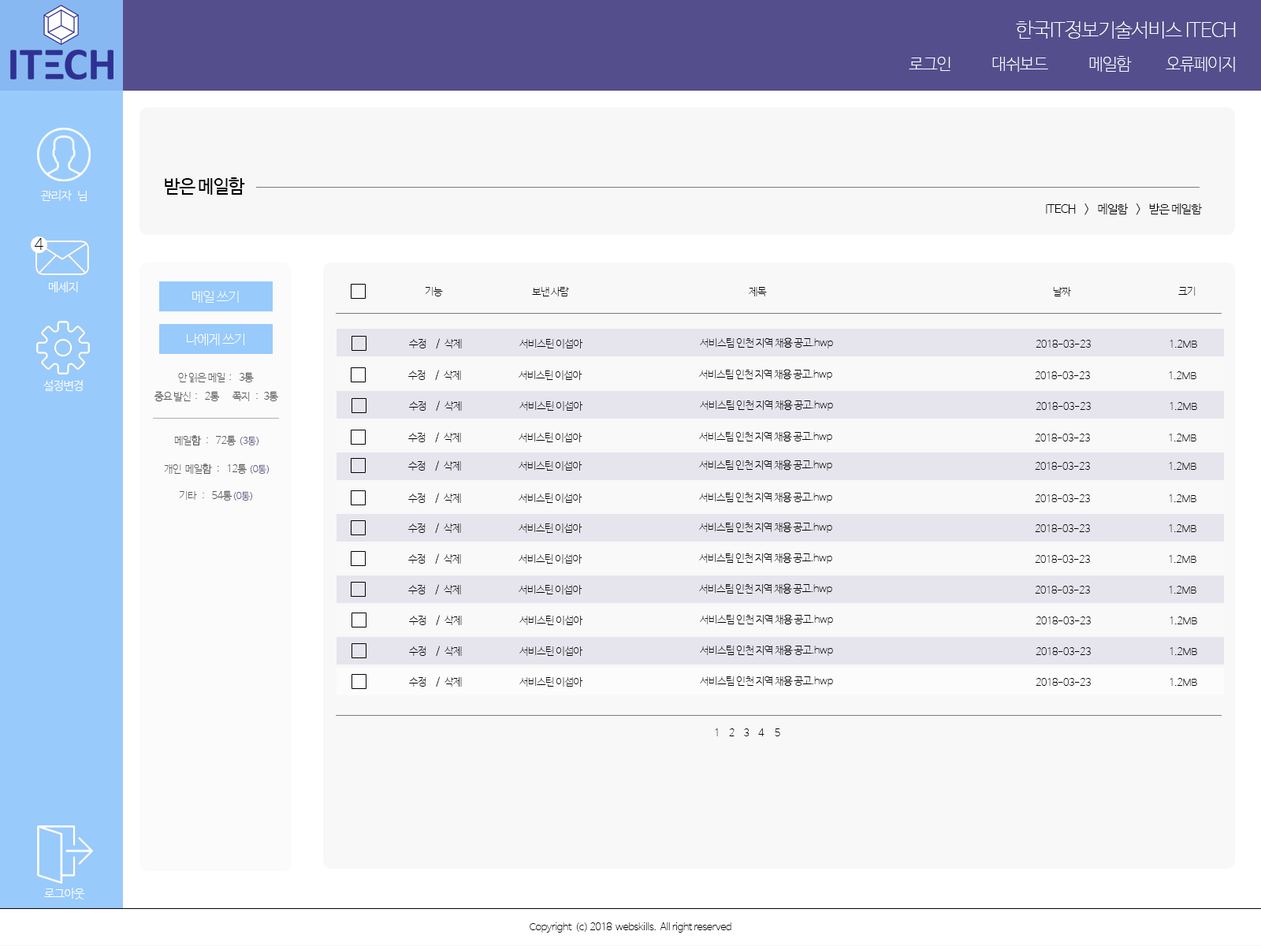
<style>
.page{position:relative;width:1261px;height:946px}
.page>*{position:absolute;margin:0}
.t1{font:19.7px "NanumBarunGothicUltraLight";letter-spacing:-0.045em;color:#ffffff}
.t2{font:16.5px "NanumBarunGothicUltraLight";letter-spacing:-0.045em;color:#ffffff}
.t3{font:18.1px "NanumBarunGothic";letter-spacing:-0.045em;color:#000000}
.t4{font:11.8px "NanumBarunGothicLight";letter-spacing:-0.045em;color:#ffffff}
.t5{font:11.8px "NanumBarunGothicLight";letter-spacing:-0.045em;color:#000000}
.t6{font:15.4px "NanumBarunGothicUltraLight";letter-spacing:-0.045em;color:#000000}
.t7{font:13.4px "NanumBarunGothicUltraLight";letter-spacing:-0.045em;color:#ffffff}
.t8{font:10.2px "NanumBarunGothicUltraLight";letter-spacing:-0.045em;color:#000000}
.t9{font:10.2px "NanumBarunGothicUltraLight";letter-spacing:-0.045em;color:#565656}
.t10{font:9.5px "NanumBarunGothicUltraLight";letter-spacing:-0.045em;color:#676085}
</style>
<div class="page">
<p class="t1" style="left:1016px;top:20px;width:220px;height:19px">한국IT정보기술서비스 ITECH</p>
<p class="t2" style="left:909px;top:57px;width:41px;height:14px">로그인</p>
<p class="t2" style="left:992px;top:57px;width:56px;height:15px">대쉬보드</p>
<p class="t2" style="left:1089px;top:56px;width:43px;height:16px">메일함</p>
<p class="t2" style="left:1166px;top:57px;width:69px;height:15px">오류페이지</p>
<p class="t3" style="left:165px;top:177px;width:80px;height:18px">받은 메일함</p>
<p class="t4" style="left:41px;top:190px;width:46px;height:11px">관리자   님</p>
<p class="t5" style="left:1046px;top:203px;width:156px;height:12px">ITECH    &gt;    메일함    &gt;    받은 메일함</p>
<p class="t6" style="left:34px;top:238px;width:9px;height:12px">4</p>
<p class="t4" style="left:49px;top:281px;width:29px;height:11px">메세지</p>
<p class="t7" style="left:192px;top:291px;width:47px;height:12px">메일 쓰기</p>
<p class="t8" style="left:425px;top:287px;width:18px;height:9px">기능</p>
<p class="t8" style="left:532px;top:287px;width:37px;height:9px">보낸 사람</p>
<p class="t8" style="left:749px;top:287px;width:18px;height:9px">제목</p>
<p class="t8" style="left:1053px;top:287px;width:18px;height:9px">날짜</p>
<p class="t8" style="left:1178px;top:287px;width:18px;height:9px">크기</p>
<p class="t7" style="left:187px;top:333px;width:57px;height:12px">나에게 쓰기</p>
<p class="t8" style="left:409px;top:338px;width:31px;height:11px">수정     /</p>
<p class="t8" style="left:444px;top:339px;width:18px;height:9px">삭제</p>
<p class="t8" style="left:519px;top:339px;width:64px;height:9px">서비스틴 이섭아</p>
<p class="t8" style="left:700px;top:337px;width:133px;height:11px">서비스팀 인천 지역 채용 공고.hwp</p>
<p class="t8" style="left:1036px;top:340px;width:55px;height:8px">2018-03-23</p>
<p class="t8" style="left:1169px;top:340px;width:28px;height:8px">1.2MB</p>
<p class="t9" style="left:178px;top:372px;width:76px;height:10px">안 읽은 메일  :    3통</p>
<p class="t8" style="left:408px;top:370px;width:31px;height:11px">수정     /</p>
<p class="t8" style="left:444px;top:370px;width:17px;height:10px">삭제</p>
<p class="t8" style="left:519px;top:370px;width:63px;height:10px">서비스틴 이섭아</p>
<p class="t8" style="left:699px;top:369px;width:133px;height:11px">서비스팀 인천 지역 채용 공고.hwp</p>
<p class="t8" style="left:1035px;top:371px;width:55px;height:8px">2018-03-23</p>
<p class="t8" style="left:1169px;top:371px;width:27px;height:8px">1.2MB</p>
<p class="t4" style="left:43px;top:380px;width:40px;height:11px">설정변경</p>
<p class="t9" style="left:154px;top:391px;width:66px;height:11px">중요 발신  :    2통</p>
<p class="t9" style="left:232px;top:391px;width:46px;height:10px">쪽지   :   3통</p>
<p class="t8" style="left:409px;top:400px;width:31px;height:11px">수정     /</p>
<p class="t8" style="left:444px;top:401px;width:18px;height:10px">삭제</p>
<p class="t8" style="left:519px;top:401px;width:64px;height:10px">서비스틴 이섭아</p>
<p class="t8" style="left:700px;top:400px;width:133px;height:11px">서비스팀 인천 지역 채용 공고.hwp</p>
<p class="t8" style="left:1036px;top:402px;width:55px;height:8px">2018-03-23</p>
<p class="t8" style="left:1169px;top:402px;width:28px;height:8px">1.2MB</p>
<p class="t9" style="left:174px;top:435px;width:62px;height:10px">메일함   :    72통</p>
<p class="t10" style="left:240px;top:436px;width:18px;height:9px">(3통)</p>
<p class="t8" style="left:408px;top:432px;width:31px;height:11px">수정     /</p>
<p class="t8" style="left:444px;top:433px;width:17px;height:9px">삭제</p>
<p class="t8" style="left:519px;top:433px;width:63px;height:9px">서비스틴 이섭아</p>
<p class="t8" style="left:699px;top:431px;width:133px;height:11px">서비스팀 인천 지역 채용 공고.hwp</p>
<p class="t8" style="left:1035px;top:433px;width:55px;height:8px">2018-03-23</p>
<p class="t8" style="left:1169px;top:433px;width:27px;height:8px">1.2MB</p>
<p class="t8" style="left:408px;top:460px;width:31px;height:11px">수정     /</p>
<p class="t8" style="left:444px;top:461px;width:17px;height:9px">삭제</p>
<p class="t8" style="left:519px;top:461px;width:63px;height:9px">서비스틴 이섭아</p>
<p class="t8" style="left:699px;top:459px;width:133px;height:11px">서비스팀 인천 지역 채용 공고.hwp</p>
<p class="t8" style="left:1035px;top:462px;width:55px;height:8px">2018-03-23</p>
<p class="t8" style="left:1169px;top:462px;width:27px;height:8px">1.2MB</p>
<p class="t9" style="left:164px;top:463px;width:83px;height:11px">개인  메일함   :    12통</p>
<p class="t10" style="left:250px;top:464px;width:19px;height:10px">(0통)</p>
<p class="t9" style="left:179px;top:490px;width:53px;height:10px">기타   :    54통</p>
<p class="t10" style="left:233px;top:491px;width:19px;height:9px">(0통)</p>
<p class="t8" style="left:408px;top:493px;width:31px;height:11px">수정     /</p>
<p class="t8" style="left:444px;top:493px;width:17px;height:10px">삭제</p>
<p class="t8" style="left:519px;top:493px;width:63px;height:10px">서비스틴 이섭아</p>
<p class="t8" style="left:699px;top:492px;width:133px;height:11px">서비스팀 인천 지역 채용 공고.hwp</p>
<p class="t8" style="left:1035px;top:494px;width:55px;height:8px">2018-03-23</p>
<p class="t8" style="left:1169px;top:494px;width:27px;height:8px">1.2MB</p>
<p class="t8" style="left:699px;top:522px;width:133px;height:11px">서비스팀 인천 지역 채용 공고.hwp</p>
<p class="t8" style="left:408px;top:522px;width:31px;height:12px">수정     /</p>
<p class="t8" style="left:444px;top:523px;width:17px;height:10px">삭제</p>
<p class="t8" style="left:519px;top:523px;width:63px;height:10px">서비스틴 이섭아</p>
<p class="t8" style="left:1035px;top:524px;width:55px;height:8px">2018-03-23</p>
<p class="t8" style="left:1169px;top:524px;width:27px;height:8px">1.2MB</p>
<p class="t8" style="left:408px;top:553px;width:31px;height:11px">수정     /</p>
<p class="t8" style="left:444px;top:554px;width:17px;height:9px">삭제</p>
<p class="t8" style="left:519px;top:554px;width:63px;height:9px">서비스틴 이섭아</p>
<p class="t8" style="left:699px;top:552px;width:133px;height:11px">서비스팀 인천 지역 채용 공고.hwp</p>
<p class="t8" style="left:1035px;top:555px;width:55px;height:8px">2018-03-23</p>
<p class="t8" style="left:1169px;top:555px;width:27px;height:8px">1.2MB</p>
<p class="t8" style="left:408px;top:584px;width:31px;height:11px">수정     /</p>
<p class="t8" style="left:444px;top:585px;width:17px;height:9px">삭제</p>
<p class="t8" style="left:519px;top:585px;width:63px;height:9px">서비스틴 이섭아</p>
<p class="t8" style="left:699px;top:583px;width:133px;height:11px">서비스팀 인천 지역 채용 공고.hwp</p>
<p class="t8" style="left:1035px;top:586px;width:55px;height:7px">2018-03-23</p>
<p class="t8" style="left:1169px;top:586px;width:27px;height:7px">1.2MB</p>
<p class="t8" style="left:409px;top:615px;width:31px;height:11px">수정     /</p>
<p class="t8" style="left:444px;top:615px;width:18px;height:10px">삭제</p>
<p class="t8" style="left:519px;top:615px;width:64px;height:10px">서비스틴 이섭아</p>
<p class="t8" style="left:700px;top:614px;width:133px;height:11px">서비스팀 인천 지역 채용 공고.hwp</p>
<p class="t8" style="left:1036px;top:616px;width:55px;height:8px">2018-03-23</p>
<p class="t8" style="left:1169px;top:616px;width:28px;height:8px">1.2MB</p>
<p class="t8" style="left:409px;top:645px;width:31px;height:11px">수정     /</p>
<p class="t8" style="left:444px;top:646px;width:18px;height:10px">삭제</p>
<p class="t8" style="left:519px;top:646px;width:64px;height:10px">서비스틴 이섭아</p>
<p class="t8" style="left:700px;top:645px;width:133px;height:11px">서비스팀 인천 지역 채용 공고.hwp</p>
<p class="t8" style="left:1036px;top:647px;width:55px;height:8px">2018-03-23</p>
<p class="t8" style="left:1169px;top:647px;width:28px;height:8px">1.2MB</p>
<p class="t8" style="left:409px;top:676px;width:31px;height:11px">수정     /</p>
<p class="t8" style="left:444px;top:677px;width:18px;height:9px">삭제</p>
<p class="t8" style="left:519px;top:677px;width:64px;height:9px">서비스틴 이섭아</p>
<p class="t8" style="left:700px;top:675px;width:133px;height:11px">서비스팀 인천 지역 채용 공고.hwp</p>
<p class="t8" style="left:1036px;top:678px;width:55px;height:8px">2018-03-23</p>
<p class="t8" style="left:1169px;top:678px;width:28px;height:8px">1.2MB</p>
<p class="t8" style="left:715px;top:728px;width:65px;height:8px">1     2     3     4      5</p>
<p class="t4" style="left:44px;top:887px;width:41px;height:12px">로그아웃</p>
<p class="t8" style="left:530px;top:922px;width:201px;height:10px">Copyright  (c) 2018  webskills.  All right reserved</p>
</div>
